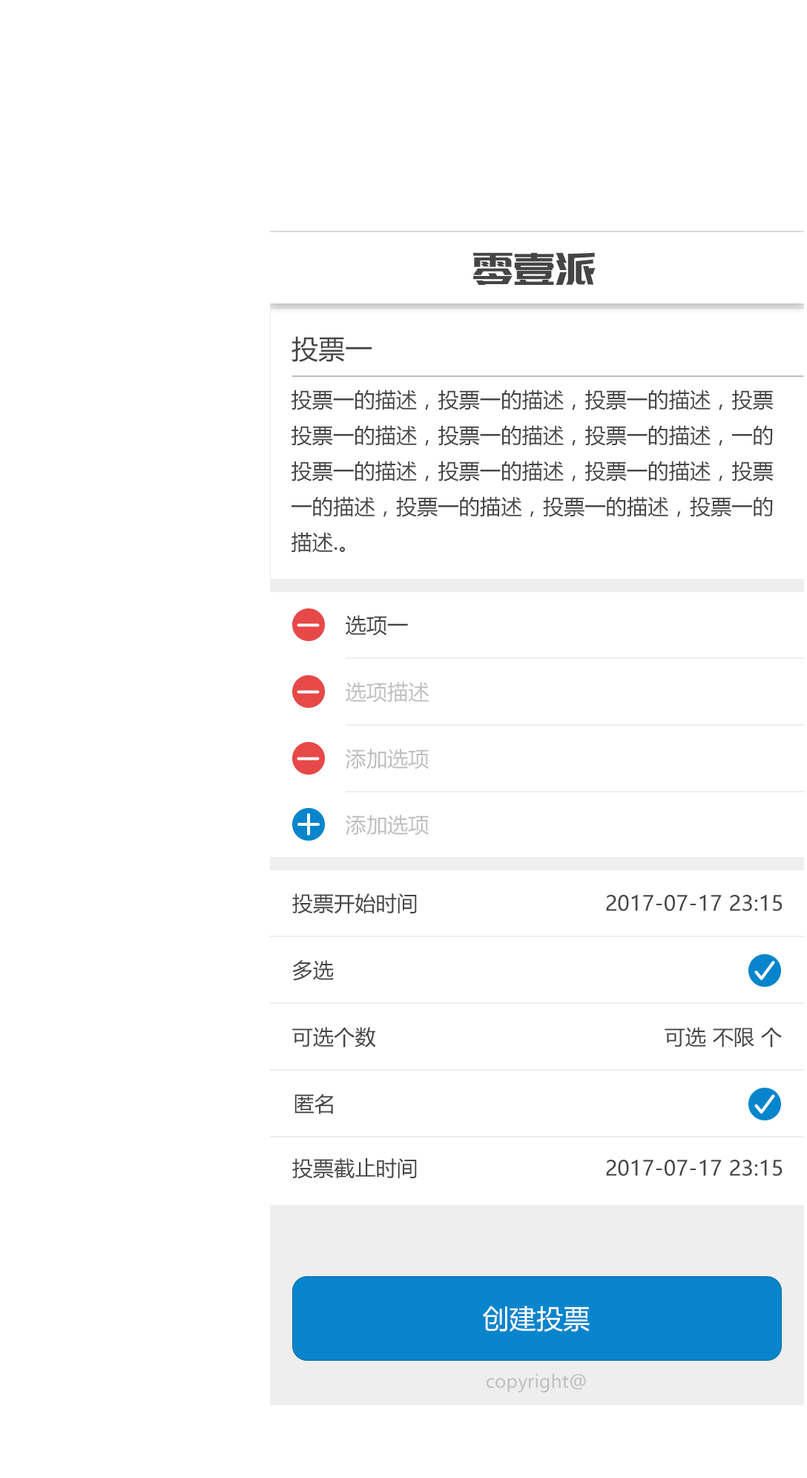
<style>
.page{position:relative;width:807px;height:1478px;background:#ffffff}
.page>*{position:absolute;margin:0}
.t1{font:44.5px "PangMenZhengDao";letter-spacing:0.01em;color:#454545}
.t2{font:26.7px "MicrosoftYaHeiUI";letter-spacing:0.01em;color:#454545}
.t3{font:20.8px/35.6px "MicrosoftYaHeiUI";letter-spacing:0.01em;color:#454545}
.t4{font:20.8px "MicrosoftYaHeiUI";letter-spacing:0.01em;color:#454545}
.t5{font:20.8px "MicrosoftYaHeiUI";letter-spacing:0.01em;color:#bfbfbf}
.t6{font:26.7px "MicrosoftYaHeiUI";letter-spacing:0.01em;color:#ffffff}
.t7{font:17.8px "MicrosoftYaHeiUI";letter-spacing:0.01em;color:#bfbfbf}
</style>
<div class="page">
<p class="t1" style="left:473px;top:252px;width:123px;height:33px">零壹派</p>
<p class="t2" style="left:292px;top:336px;width:80px;height:26px">投票一</p>
<p class="t3" style="left:292px;top:389px;width:482px;height:164px">投票一的描述，投票一的描述，投票一的描述，投票<br>投票一的描述，投票一的描述，投票一的描述，一的<br>投票一的描述，投票一的描述，投票一的描述，投票<br>一的描述，投票一的描述，投票一的描述，投票一的<br>描述.。</p>
<p class="t4" style="left:346px;top:615px;width:62px;height:21px">选项一</p>
<p class="t5" style="left:346px;top:682px;width:83px;height:20px">选项描述</p>
<p class="t5" style="left:346px;top:748px;width:83px;height:21px">添加选项</p>
<p class="t5" style="left:346px;top:814px;width:83px;height:21px">添加选项</p>
<p class="t4" style="left:292px;top:893px;width:125px;height:21px">投票开始时间</p>
<p class="t4" style="left:606px;top:895px;width:177px;height:16px">2017-07-17 23:15</p>
<p class="t4" style="left:292px;top:960px;width:42px;height:21px">多选</p>
<p class="t4" style="left:292px;top:1027px;width:84px;height:20px">可选个数</p>
<p class="t4" style="left:665px;top:1027px;width:117px;height:20px">可选 不限 个</p>
<p class="t4" style="left:294px;top:1093px;width:39px;height:21px">匿名</p>
<p class="t4" style="left:292px;top:1158px;width:125px;height:21px">投票截止时间</p>
<p class="t4" style="left:606px;top:1159px;width:177px;height:17px">2017-07-17 23:15</p>
<p class="t6" style="left:483px;top:1305px;width:107px;height:26px">创建投票</p>
<p class="t7" style="left:487px;top:1373px;width:99px;height:19px">copyright@</p>
</div>
